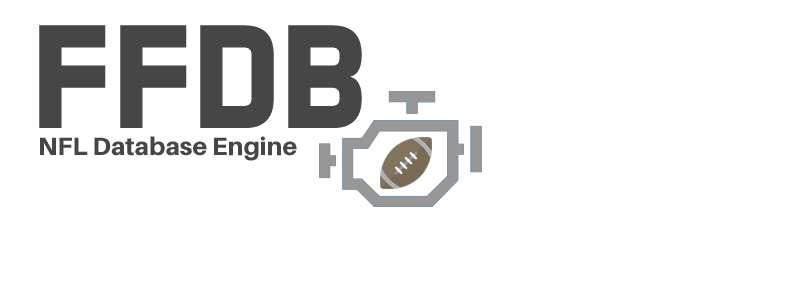
<style>
.page{position:relative;width:800px;height:300px;background:#ffffff}
.page>*{position:absolute;margin:0}
.t1{font:150px "AeroMaticsBold";color:#464646}
.t2{font:25px "Aileron-Heavy";color:#464646}
</style>
<div class="page">
<p class="t1" style="left:39px;top:25px;width:323px;height:103px">FFDB</p>
<p class="t2" style="left:40px;top:136px;width:257px;height:25px">NFL Database Engine</p>
</div>
